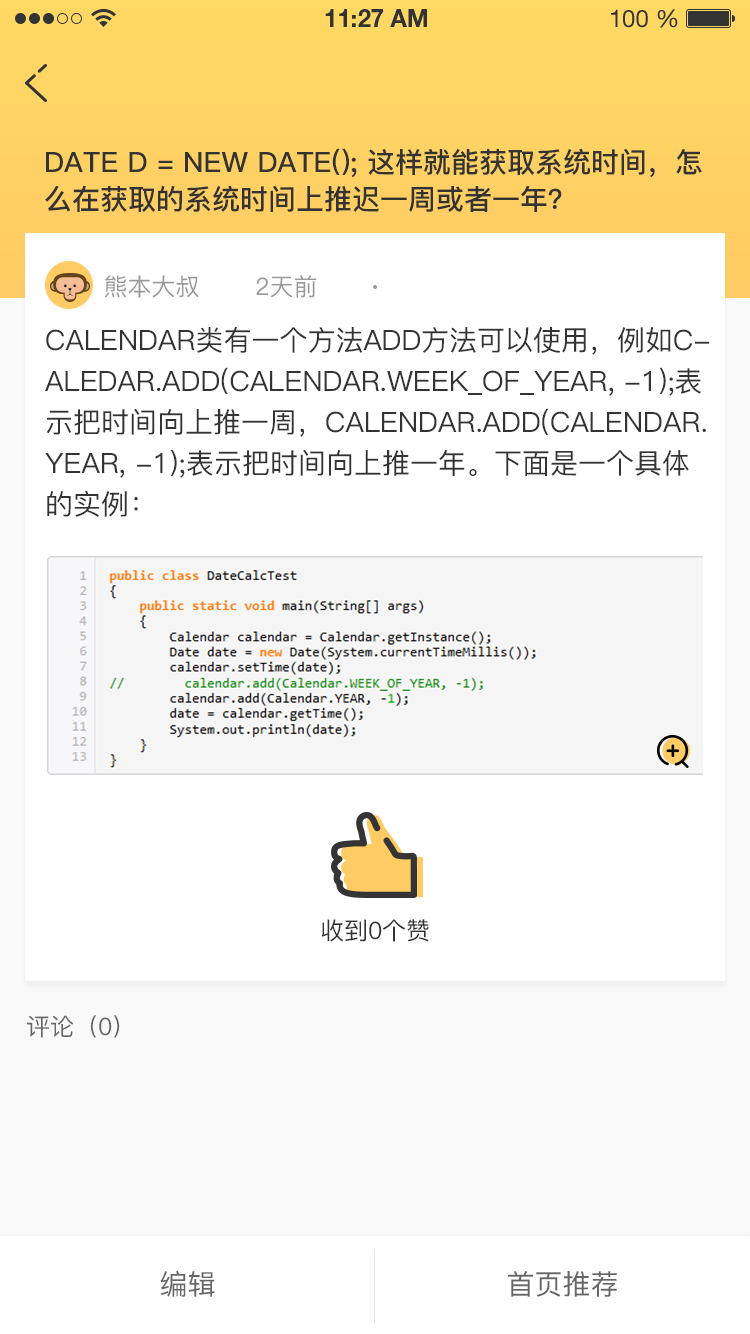
<style>
.page{position:relative;width:750px;height:1334px;background:#ffffff}
.page>*{position:absolute;margin:0}
.t1{font:28px/37px "PingFang-SC-Bold";color:#333333;text-transform:uppercase}
.t2{font:24px "PingFang-SC-Medium";color:#999999;text-transform:uppercase}
.t3{font:28px/41px "PingFang-SC-Medium";color:#333333;text-transform:uppercase}
.t4{font:24px "PingFang-SC-Medium";color:#333333;text-transform:uppercase}
.t5{font:24px "PingFang-SC-Medium";color:#666666;text-transform:uppercase}
.t6{font:28px "PingFang-SC-Medium";color:#666666;text-transform:uppercase}
</style>
<div class="page">
<p class="t1" style="left:45px;top:148px;width:657px;height:64px">Date d = new Date(); 这样就能获取系统时间，怎<br>么在获取的系统时间上推迟一周或者一年？</p>
<p class="t2" style="left:104px;top:275px;width:213px;height:23px">熊本大叔       2天前</p>
<p class="t3" style="left:45px;top:327px;width:664px;height:190px">Calendar类有一个方法add方法可以使用，例如c-<br>aledar.add(Calendar.WEEK_OF_YEAR, -1);表<br>示把时间向上推一周，calendar.add(Calendar.<br>YEAR, -1);表示把时间向上推一年。下面是一个具体<br>的实例：</p>
<p class="t4" style="left:321px;top:919px;width:108px;height:23px">收到0个赞</p>
<p class="t5" style="left:27px;top:1015px;width:93px;height:23px">评论（0）</p>
<p class="t6" style="left:160px;top:1271px;width:55px;height:26px">编辑</p>
<p class="t6" style="left:508px;top:1271px;width:109px;height:26px">首页推荐</p>
</div>
